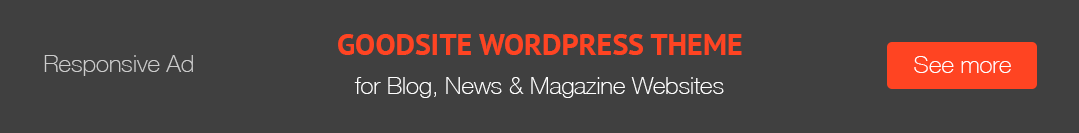
<style>
.page{position:relative;width:1079px;height:133px;background:#404040}
.page>*{position:absolute;margin:0}
.t1{font:30px "PTSans-Bold";color:#ff4422}
.t2{font:24px "HelveticaNeue-Thin";color:#cccccc}
.t3{font:24px "HelveticaNeue-Thin";color:#ffffff}
</style>
<div class="page">
<p class="t1" style="left:338px;top:34px;width:404px;height:21px">GOODSITE WORDPRESS THEME</p>
<p class="t2" style="left:44px;top:55px;width:149px;height:21px">Responsive Ad</p>
<p class="t3" style="left:914px;top:56px;width:97px;height:17px">See more</p>
<p class="t3" style="left:354px;top:77px;width:370px;height:21px">for Blog, News &amp; Magazine Websites</p>
</div>
